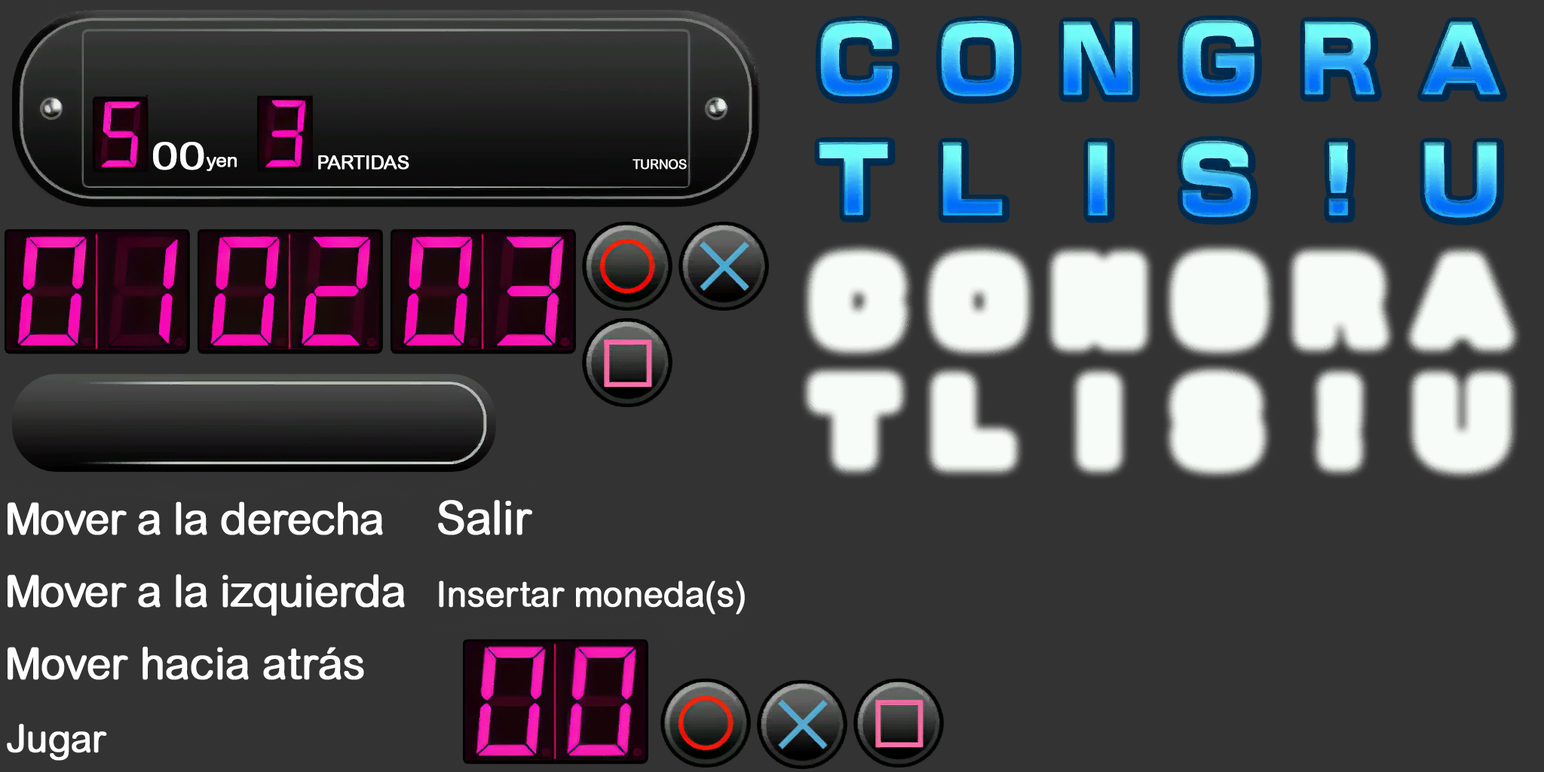
<style>
.page{position:relative;width:1544px;height:772px;background:#333333}
.page>*{position:absolute;margin:0}
.t1{font:37.8px "ArialRoundedMT";letter-spacing:-0.02em;color:#ffffff;text-transform:uppercase;font-weight:bold;scale:1.26 1}
.t2{font:19px "ArialRoundedMT";letter-spacing:-0.02em;color:#ffffff;font-weight:bold}
.t3{font:19px "ArialRoundedMT";letter-spacing:-0.02em;color:#ffffff;text-transform:uppercase;font-weight:bold}
.t4{font:13.5px "ArialRoundedMT";letter-spacing:-0.02em;color:#ffffff;text-transform:uppercase;font-weight:bold;scale:0.96 1}
.t5{font:43.7px "ArialRoundedMT";letter-spacing:-0.03em;color:#ffffff;font-weight:bold}
.t6{font:46.3px "ArialRoundedMT";letter-spacing:-0.02em;color:#ffffff;font-weight:bold}
.t7{font:35.2px "ArialRoundedMT";letter-spacing:-0.02em;color:#ffffff;font-weight:bold}
.t8{font:43.7px "ArialRoundedMT";letter-spacing:-0.02em;color:#ffffff;font-weight:bold}
.t9{font:38px "ArialRoundedMT";letter-spacing:-0.02em;color:#ffffff;font-weight:bold}
</style>
<div class="page">
<p class="t1" style="left:153px;top:142px;width:51px;height:28px">00</p>
<p class="t2" style="left:207px;top:157px;width:30px;height:14px">yen</p>
<p class="t3" style="left:318px;top:155px;width:91px;height:15px">Partidas</p>
<p class="t4" style="left:633px;top:159px;width:54px;height:11px">turnos</p>
<p class="t5" style="left:8px;top:501px;width:375px;height:34px">Mover a la derecha</p>
<p class="t6" style="left:438px;top:500px;width:94px;height:35px">Salir</p>
<p class="t5" style="left:8px;top:574px;width:397px;height:42px">Mover a la izquierda</p>
<p class="t7" style="left:439px;top:581px;width:306px;height:34px">Insertar moneda(s)</p>
<p class="t8" style="left:8px;top:646px;width:356px;height:34px">Mover hacia atrás</p>
<p class="t9" style="left:7px;top:724px;width:100px;height:37px">Jugar</p>
</div>
